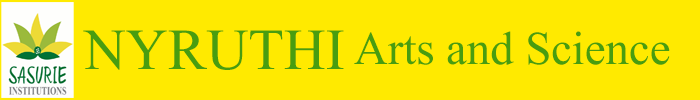
<style>
.page{position:relative;width:700px;height:100px;background:#ffea00}
.page>*{position:absolute;margin:0}
.t1{font:72px "Aparajita";color:#489d10}
.t2{font:58px "Aparajita";color:#489d10}
</style>
<div class="page">
<p class="t1" style="left:83px;top:30px;width:261px;height:40px">NYRUTHI</p>
<p class="t2" style="left:354px;top:31px;width:316px;height:34px">Arts and Science</p>
</div>
